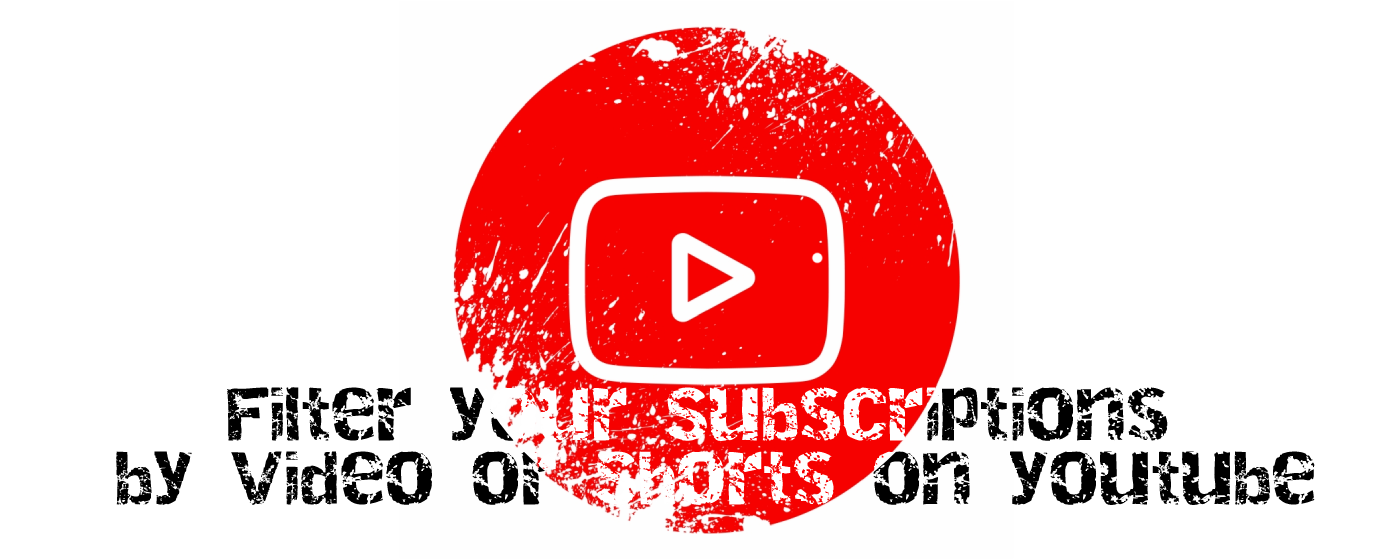
<style>
.page{position:relative;width:1400px;height:560px;background:#ffffff}
.page>*{position:absolute;margin:0}
.t1{font:53px "Destroy";color:#000000}
</style>
<div class="page">
<p class="t1" style="left:116px;top:387px;width:1199px;height:118px;text-align:center">Filter your Subscriptions <br>by Video or Shorts on youtube</p>
</div>
